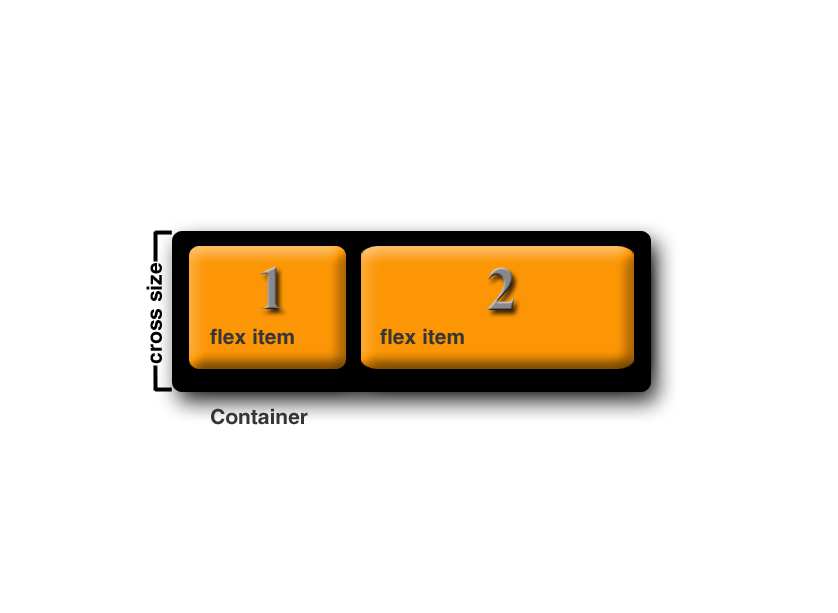
<style>
.page{position:relative;width:838px;height:613px;background:#ffffff}
.page>*{position:absolute;margin:0}
.t1{font:21px "HelveticaLTStd-Bold";color:#000000}
.t2{font:63px "TimesNewRomanPS-BoldMT";color:#898989}
.t3{font:63px "TimesNewRomanPS-BoldMT"}
.t4{font:21px "HelveticaLTStd-Bold";color:#363636}
</style>
<div class="page">
<p class="t1" style="left:146px;top:263px;width:16px;height:101px;rotate:-90deg">cross size</p>
<p class="t2" style="left:260px;top:266px;width:23px;height:43px">1</p>
<p class="t3" style="left:487px;top:267px;width:28px;height:43px">2</p>
<p class="t4" style="left:210px;top:328px;width:84px;height:17px">flex item</p>
<p class="t4" style="left:380px;top:328px;width:84px;height:17px">flex item</p>
<p class="t4" style="left:211px;top:408px;width:97px;height:17px">Container</p>
</div>
